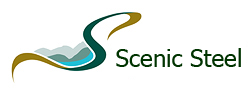
<style>
.page{position:relative;width:250px;height:96px;background:#ffffff}
.page>*{position:absolute;margin:0}
.t1{font:24px "Tahoma";color:#003300}
</style>
<div class="page">
<p class="t1" style="left:116px;top:48px;width:125px;height:19px">Scenic Steel</p>
</div>
